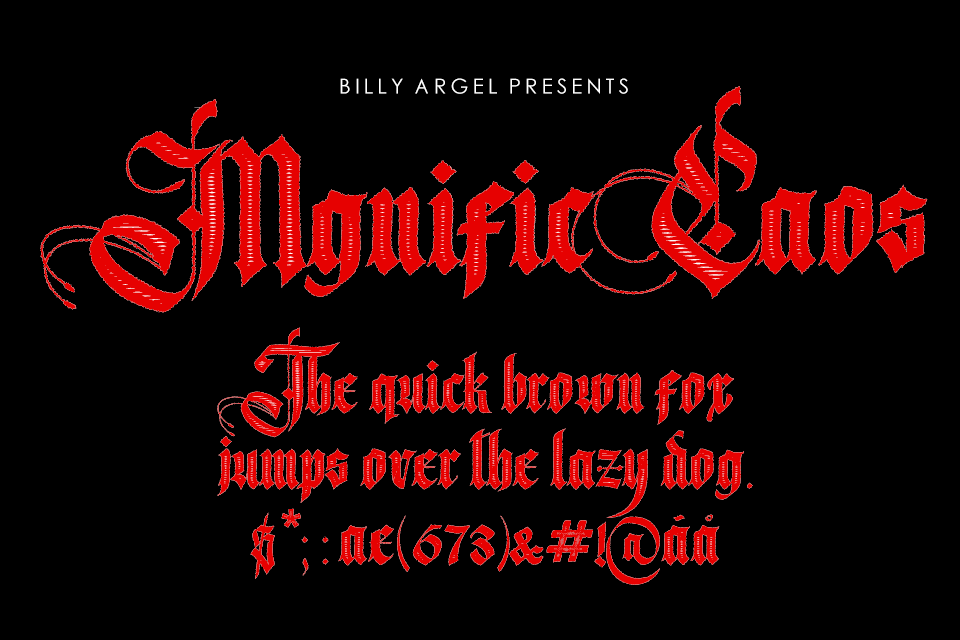
<style>
.page{position:relative;width:960px;height:640px;background:#000000}
.page>*{position:absolute;margin:0}
.t1{font:20.4px "CenturyGothic";color:#ffffff}
.t2{font:173.8px "MagnificCaosBack-Regular";color:#e60101}
.t3{font:173.8px "MagnificCaos-Regular";color:#e60101}
.t4{font:81px/75.9px "MagnificCaosBack-Regular";color:#e60101}
.t5{font:81px/75.9px "OAKLAND-Regular";color:#e60101}
.t6{font:81px/75.9px "MagnificCaos-Regular";color:#e60101}
</style>
<div class="page">
<p class="t1" style="left:340px;top:78px;width:288px;height:16px">BILLY  ARGEL  PRESENTS</p>
<p class="t2" style="left:40px;top:86px;width:888px;height:227px">Mgnific  Caos</p>
<p class="t3" style="left:40px;top:86px;width:888px;height:227px">Mgnific  Caos</p>
<p class="t4" style="left:217px;top:327px;width:536px;height:258px;text-align:center">The quick brown fox<br>jumps over the lazy dog.<br>$<span class="t5">*</span>; : æ(673)&amp;<span class="t5">#</span>!@áå</p>
<p class="t6" style="left:217px;top:327px;width:536px;height:258px;text-align:center">The quick brown fox<br>jumps over the lazy dog.<br>$<span class="t5">*</span>; : æ(673)&amp;<span class="t5">#</span>!@áå</p>
</div>
